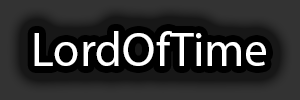
<style>
.page{position:relative;width:300px;height:100px;background:#333333}
.page>*{position:absolute;margin:0}
.t1{font:48px "MyriadPro-Regular";color:#ffffff}
</style>
<div class="page">
<p class="t1" style="left:34px;top:31px;width:232px;height:35px">LordOfTime</p>
</div>
